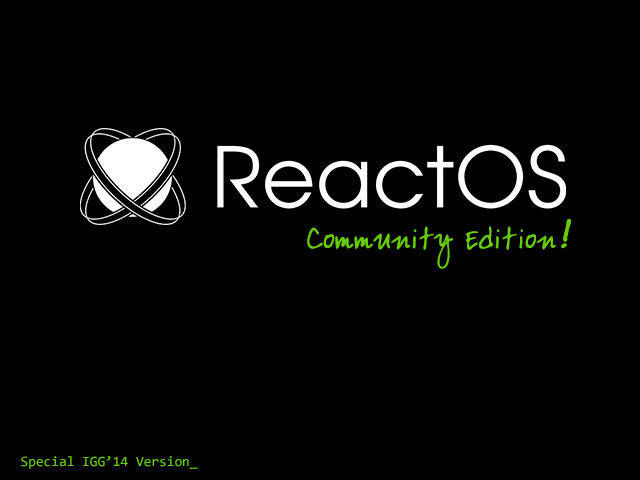
<style>
.page{position:relative;width:640px;height:480px;background:#000000}
.page>*{position:absolute;margin:0}
.t1{font:30px "ArdleysHand-Plain";color:#66cc00}
.t2{font:36px "ArdleysHand-Plain";color:#66cc00;font-weight:bold;font-style:italic}
.t3{font:14px "Consolas";color:#66cc00}
</style>
<div class="page">
<p class="t1" style="left:307px;top:219px;width:265px;height:50px">Community Edition<span class="t2">!</span></p>
<p class="t3" style="left:21px;top:456px;width:177px;height:13px">Special IGG’14 Version_</p>
</div>
